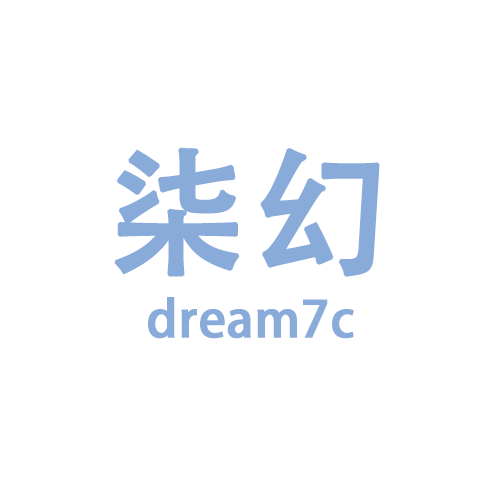
<style>
.page{position:relative;width:500px;height:500px;background:#ffffff}
.page>*{position:absolute;margin:0}
.t1{font:50px/150px "AdobeHeitiStd-Regular";color:#88abda;font-weight:bold}
.t2{font:139px/150px "AdobeHeitiStd-Regular";color:#88abda;font-weight:bold}
</style>
<div class="page">
<p class="t1" style="left:114px;top:147px;width:266px;height:192px;text-align:center"><span class="t2">柒幻<br></span>dream7c</p>
</div>
